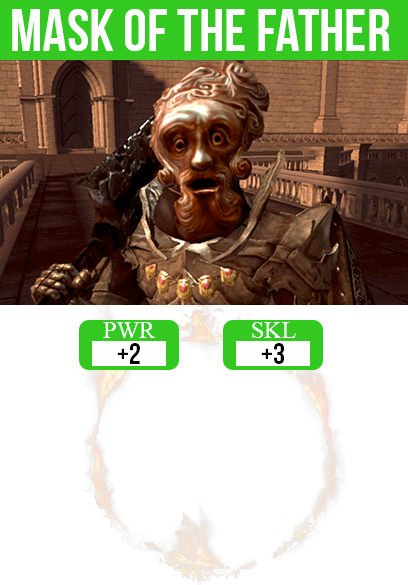
<style>
.page{position:relative;width:408px;height:585px;background:#ffffff}
.page>*{position:absolute;margin:0}
.t1{font:60px "BebasNeue";color:#ffffff}
.t2{font:24px "TimesNewRomanPSMT";color:#ffffff}
.t3{font:30px "BebasNeue";color:#000000}
</style>
<div class="page">
<p class="t1" style="left:12px;top:9px;width:378px;height:42px">mask of the father</p>
<p class="t2" style="left:103px;top:322px;width:53px;height:16px">PWR</p>
<p class="t2" style="left:252px;top:322px;width:44px;height:16px">SKL</p>
<p class="t3" style="left:117px;top:343px;width:23px;height:21px">+2</p>
<p class="t3" style="left:261px;top:343px;width:23px;height:21px">+3</p>
</div>
